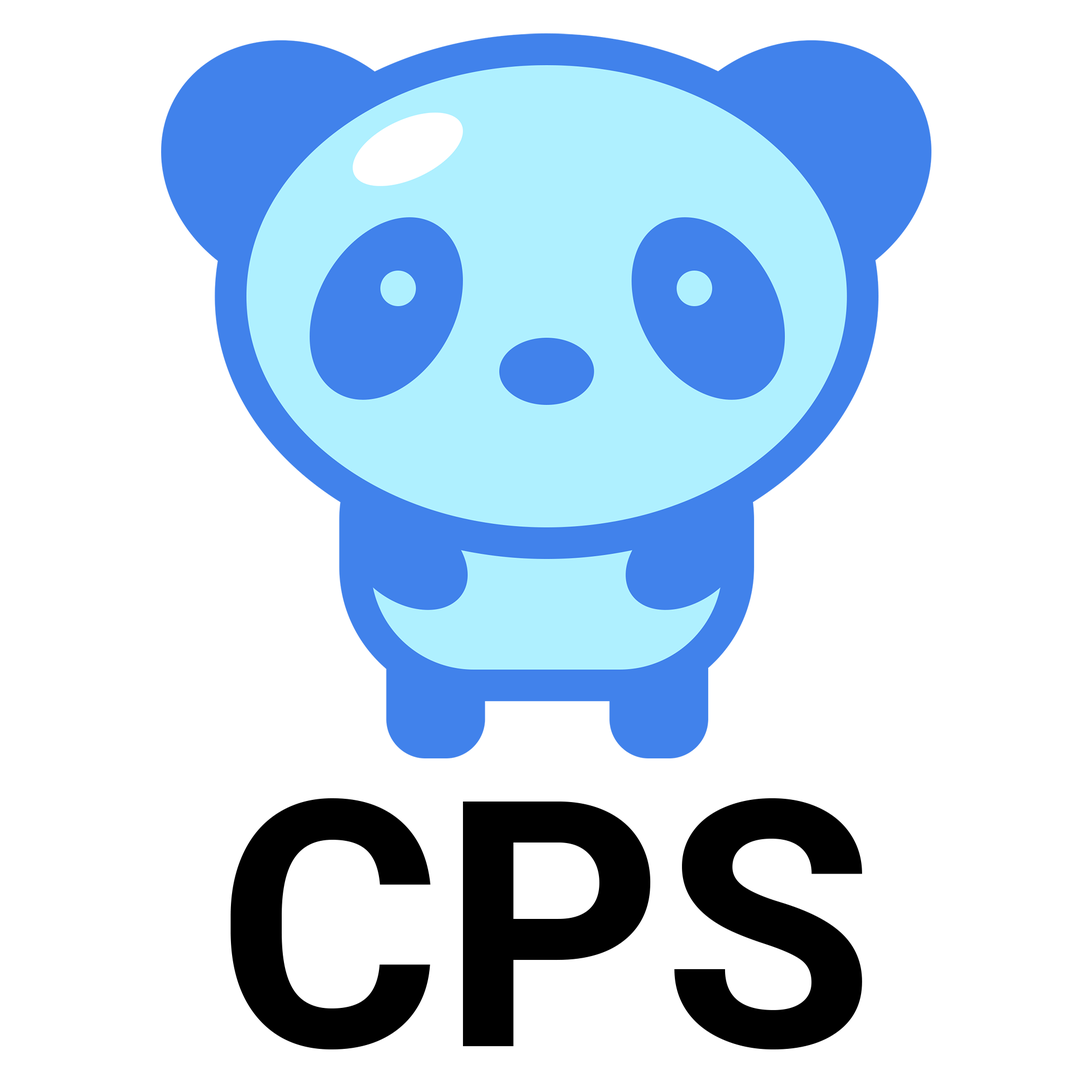
<style>
.page{position:relative;width:1092px;height:1092px;background:#ffffff}
.page>*{position:absolute;margin:0}
.t1{font:344px "Roboto-Bold";color:#000000}
</style>
<div class="page">
<p class="t1" style="left:230px;top:798px;width:632px;height:251px">CPS</p>
</div>
